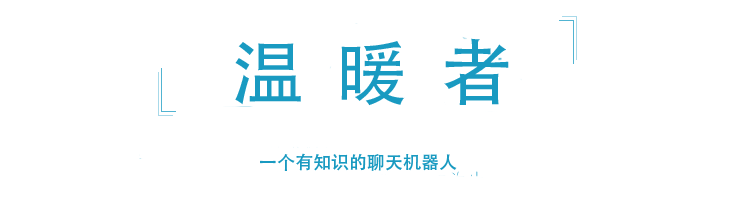
<style>
.page{position:relative;width:750px;height:200px;background:#ffffff}
.page>*{position:absolute;margin:0}
.t1{font:72px "AdobeHeitiStd-Regular";color:#199ac1}
.t2{font:18px "AdobeHeitiStd-Regular";color:#199ac1}
</style>
<div class="page">
<p class="t1" style="left:235px;top:38px;width:274px;height:68px">温  暖  者</p>
<p class="t2" style="left:260px;top:153px;width:197px;height:18px">一个有知识的聊天机器人</p>
</div>
